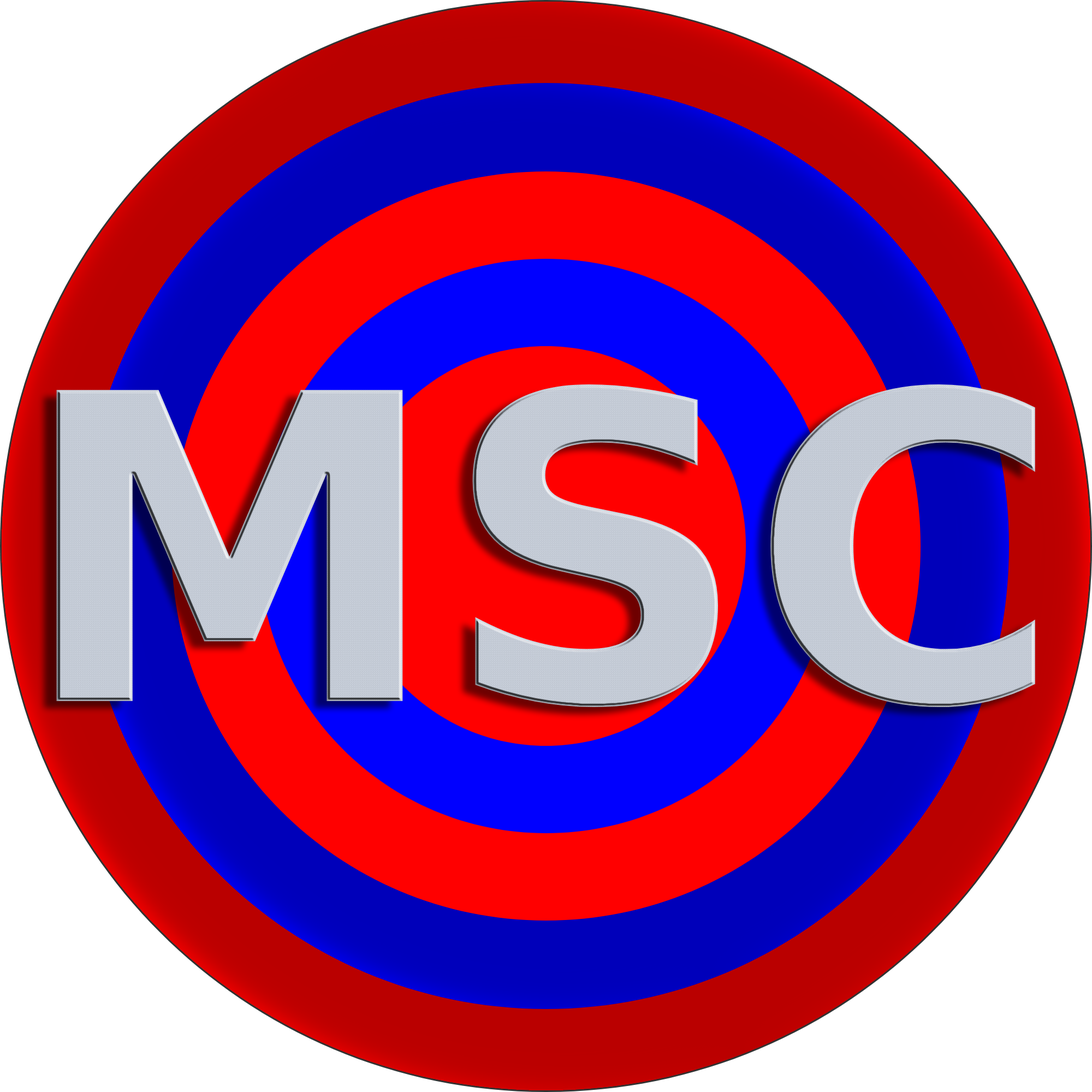
<style>
.page{position:relative;width:1092px;height:1092px;background:#ffffff}
.page>*{position:absolute;margin:0}
.t1{font:426.7px "DejaVuSans-Bold";color:#c3cad5}
</style>
<div class="page">
<p class="t1" style="left:56px;top:384px;width:979px;height:323px">MSC</p>
</div>
